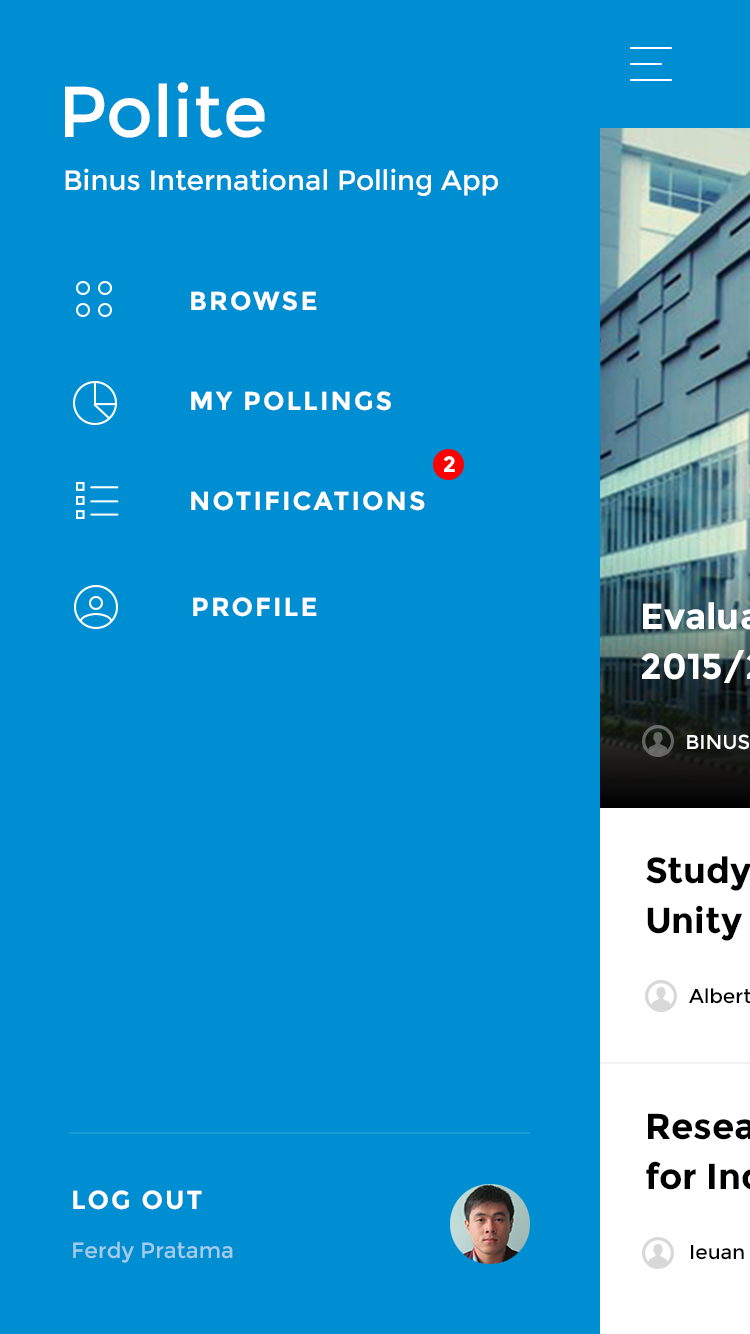
<style>
.page{position:relative;width:750px;height:1334px;background:#008ed3}
.page>*{position:absolute;margin:0}
.t1{font:72px "Montserrat-Regular";color:#ffffff}
.t2{font:28px "Montserrat-Regular";color:#ffffff}
.t3{font:26px "Montserrat-Bold";letter-spacing:0.08em;color:#ffffff}
.t4{font:22px "Montserrat-Bold";letter-spacing:0.05em;color:#ffffff}
.t5{font:22px "Montserrat-Regular";color:#a3ccea}
</style>
<div class="page">
<p class="t1" style="left:65px;top:82px;width:200px;height:56px">Polite</p>
<p class="t2" style="left:65px;top:168px;width:433px;height:28px">Binus International Polling App</p>
<p class="t3" style="left:191px;top:291px;width:126px;height:20px">BROWSE</p>
<p class="t3" style="left:191px;top:391px;width:200px;height:20px">MY POLLINGS</p>
<p class="t4" style="left:443px;top:456px;width:12px;height:16px">2</p>
<p class="t3" style="left:191px;top:491px;width:234px;height:20px">NOTIFICATIONS</p>
<p class="t3" style="left:193px;top:597px;width:124px;height:20px">PROFILE</p>
<p class="t3" style="left:73px;top:1190px;width:129px;height:20px">LOG OUT</p>
<p class="t5" style="left:73px;top:1241px;width:160px;height:22px">Ferdy Pratama</p>
</div>
